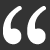
<style>
.page{position:relative;width:50px;height:50px;background:#333333}
.page>*{position:absolute;margin:0}
.t1{font:133.6px "HoeflerText-Regular";color:#ffffff}
</style>
<div class="page">
<p class="t1" style="left:3px;top:6px;width:43px;height:39px">“</p>
</div>
